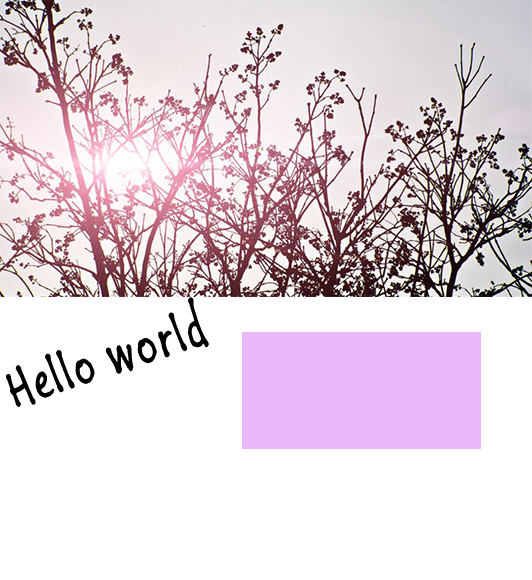
<style>
.page{position:relative;width:532px;height:580px;background:#ffffff}
.page>*{position:absolute;margin:0}
.t1{font:56.6px "BuxtonSketch";letter-spacing:0.05em;color:#010000;scale:0.81 1}
</style>
<div class="page">
<p class="t1" style="left:6px;top:297px;width:203px;height:110px;rotate:-18deg">Hello world</p>
</div>
